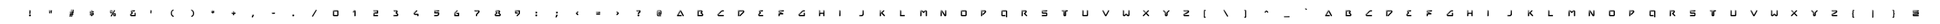
<style>
.page{position:relative;width:1940px;height:24px;background:#ffffff}
.page>*{position:absolute;margin:0}
.t1{font:9px "Chilopod-Regular";color:#000000}
</style>
<div class="page">
<p class="t1" style="left:29px;top:8px;width:1890px;height:10px">! " # $ % &amp; ' ( ) * + , - . / 0 1 2 3 4 5 6 7 8 9 : ; &lt; = &gt; ? @ A B C D E F G H I J K L M N O P Q R S T U V W X Y Z [ \ ] ^ _ ` a b c d e f g h i j k l m n o p q r s t u v w x y z { | } ~</p>
</div>
